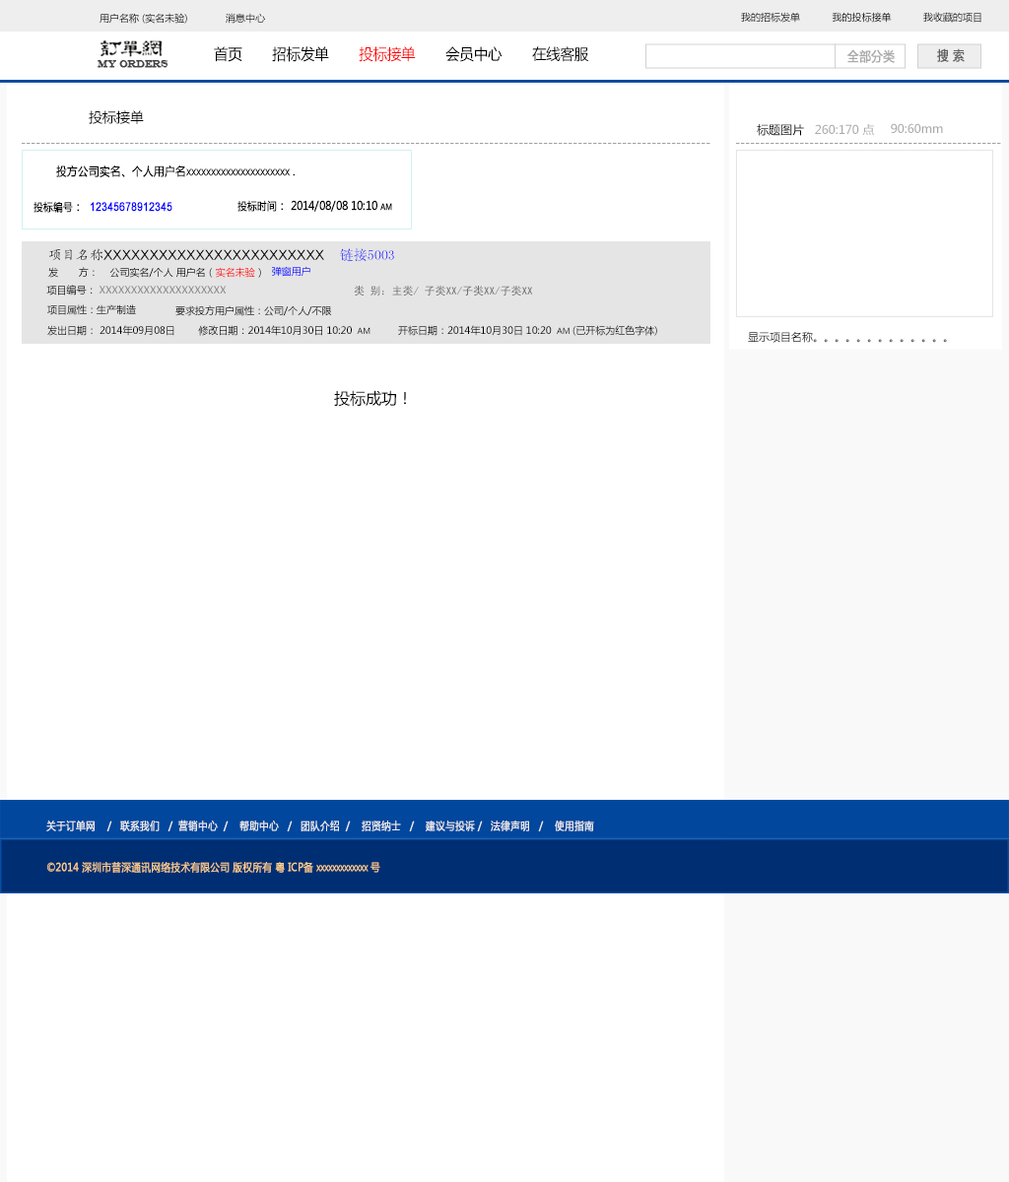
<style>
.page{position:relative;width:1009px;height:1182px;background:#ffffff}
.page>*{position:absolute;margin:0}
.t1{font:9.9px "MicrosoftYaHei";color:#000000}
.t2{font:15.2px "MicrosoftYaHei";color:#000000;font-variant:small-caps;scale:0.94 1}
.t3{font:15.2px "MicrosoftYaHei";color:#ff0000;font-variant:small-caps;scale:0.94 1}
.t4{font:13px "MicrosoftYaHei";color:#aaaaaa;font-variant:small-caps;font-weight:bold;scale:0.86 1}
.t5{font:13px "MicrosoftYaHei";color:#626262;font-variant:small-caps;font-weight:bold;scale:0.86 1}
.t6{font:9.8px "EngraversMT";color:#434343;font-variant:small-caps;font-weight:bold;scale:0.86 1}
.t7{font:13.8px "MicrosoftYaHei";color:#000000}
.t8{font:11.8px "MicrosoftYaHei";color:#000000}
.t9{font:11.8px "MicrosoftYaHei";color:#aaaaaa}
.t10{font:11.8px "MicrosoftYaHei";color:#a0a0a0}
.t11{font:11.9px "MicrosoftYaHei";color:#000000;font-variant:small-caps;font-weight:bold;scale:0.86 1}
.t12{font:10.8px "MicrosoftYaHei";color:#000000;font-variant:small-caps;font-weight:bold;scale:0.86 1}
.t13{font:11.9px "ArialMT";color:#0000ff;font-variant:small-caps;font-weight:bold;scale:0.86 1}
.t14{font:13.8px "ArialMT";color:#000000}
.t15{font:11.8px "SimHei";color:#000000}
.t16{font:13.8px "KaiTi_GB2312";color:#000000}
.t17{font:13.8px "SimSun";color:#000000}
.t18{font:9.9px "MicrosoftYaHei"}
.t19{font:9.9px "MicrosoftYaHei";color:#898989}
.t20{font:14.8px "SimHei";color:#000000}
.t21{font:10.8px "SimHei";color:#707070}
.t22{font:7.9px "MicrosoftYaHei";color:#000000}
.t23{font:10.8px "MicrosoftYaHei";color:#000000}
.t24{font:15.8px "MicrosoftYaHei";color:#000000}
.t25{font:10.8px "MicrosoftYaHei";color:#eeeeee;font-variant:small-caps;font-weight:bold;scale:0.86 1}
.t26{font:15.2px "STXihei";color:#eeeeee;font-variant:small-caps;font-weight:bold;scale:0.86 1}
.t27{font:10.8px "MicrosoftYaHei";color:#facd89;font-variant:small-caps;font-weight:bold;scale:0.87 1}
.t28{font:10.8px "MicrosoftYaHei";color:#eeeeee;font-variant:small-caps;font-weight:bold;scale:0.87 1}
</style>
<div class="page">
<p class="t1" style="left:99px;top:13px;width:166px;height:11px">用户名称 (实名未验)             消息中心</p>
<p class="t1" style="left:741px;top:12px;width:240px;height:11px">我的招标发单           我的投标接单           我收藏的项目</p>
<p class="t2" style="left:214px;top:46px;width:375px;height:16px">首页       招标发单      <span class="t3"> 投标接单</span>       会员中心       在线客服</p>
<p class="t4" style="left:847px;top:49px;width:47px;height:14px">全部分类</p>
<p class="t5" style="left:937px;top:48px;width:27px;height:14px">搜 索</p>
<p class="t6" style="left:98px;top:60px;width:70px;height:8px">MY ORDERS</p>
<p class="t7" style="left:89px;top:110px;width:55px;height:14px">投标接单</p>
<p class="t8" style="left:757px;top:124px;width:47px;height:12px">标题图片</p>
<p class="t9" style="left:815px;top:124px;width:59px;height:12px">260:170 点</p>
<p class="t9" style="left:891px;top:123px;width:52px;height:10px">90:60mm</p>
<p class="t10" style="left:22px;top:143px;width:688px;height:1px">--------------------------------------------------------------------------------------------------------------------------------------------</p>
<p class="t10" style="left:736px;top:143px;width:265px;height:1px">------------------------------------------------------</p>
<p class="t11" style="left:56px;top:165px;width:239px;height:12px">投方公司实名、个人用户名xxxxxxxxxxxxxxxxxxxxx <span class="t12">.</span></p>
<p class="t13" style="left:33px;top:201px;width:139px;height:12px"><span class="t12">投标编号</span><span class="t11">：  </span>12345678912345</p>
<p class="t11" style="left:237px;top:200px;width:155px;height:12px"><span class="t12">投标时间</span>： 2014/08/08 10:10 am</p>
<p class="t14" style="left:49px;top:248px;width:345px;height:13px"><span class="t15"><br></span><span class="t16">项目名称</span>XXXXXXXXXXXXXXXXXXXXXXXX    <span class="t17">链接5003</span></p>
<p class="t18" style="left:48px;top:267px;width:213px;height:11px">发       方：    公司实名/个人 用户名（实名未验）</p>
<p class="t18" style="left:272px;top:266px;width:38px;height:11px">弹窗用户</p>
<p class="t19" style="left:46px;top:285px;width:181px;height:11px"><span class="t20"> </span><span class="t1">项目编号： </span>XXXXXXXXXXXXXXXXXXXX</p>
<p class="t21" style="left:354px;top:286px;width:179px;height:10px">类 别：主类/ 子类XX/子类XX/子类XX</p>
<p class="t18" style="left:47px;top:304px;width:89px;height:11px">项目属性：生产制造</p>
<p class="t1" style="left:175px;top:305px;width:157px;height:11px">要求投方用户属性：公司/个人/不限</p>
<p class="t1" style="left:47px;top:325px;width:323px;height:11px">发出日期： 2014年09月08日        修改日期：2014年10月30日 10:20 <span class="t22"> AM</span></p>
<p class="t1" style="left:398px;top:325px;width:259px;height:11px">开标日期：2014年10月30日 10:20 <span class="t22"> AM </span>(已开标为红色字体)</p>
<p class="t23" style="left:748px;top:331px;width:199px;height:12px">显示项目名称。。。。。。。。。。。。。</p>
<p class="t24" style="left:334px;top:390px;width:72px;height:17px">投标成功！</p>
<p class="t25" style="left:46px;top:820px;width:548px;height:11px"><span class="t26"><br><br></span>关于订单网    /   联系我们   /  营销中心  /    帮助中心   /   团队介绍  /    招贤纳士   /    建议与投诉 /   法律声明   /    使用指南</p>
<p class="t27" style="left:47px;top:862px;width:333px;height:11px"><span class="t28"> </span>©2014 深圳市普深通讯网络技术有限公司 版权所有 粤 ICP备 xxxxxxxxxxxxx 号</p>
</div>
